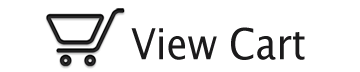
<style>
.page{position:relative;width:360px;height:72px;background:#ffffff}
.page>*{position:absolute;margin:0}
.t1{font:42.7px "LucidaSansUnicode";color:#1b1a1b;scale:0.89 1}
</style>
<div class="page">
<p class="t1" style="left:131px;top:27px;width:174px;height:33px">View Cart</p>
</div>
